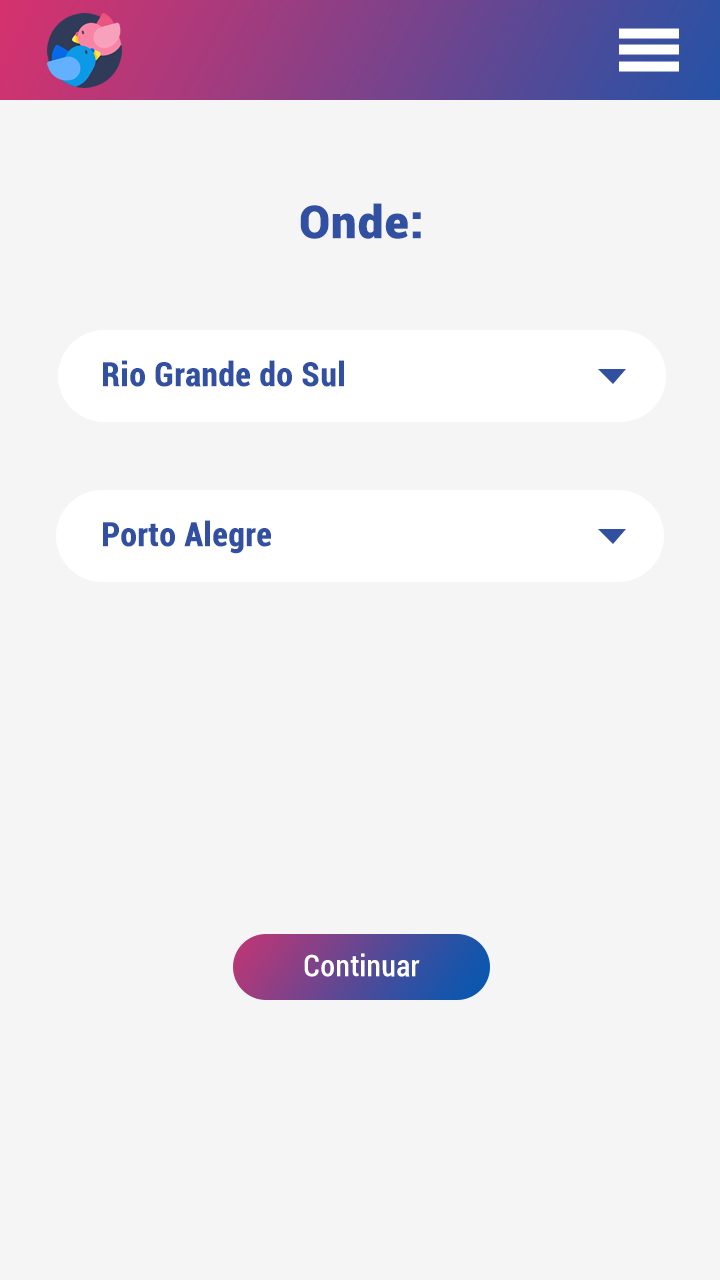
<style>
.page{position:relative;width:720px;height:1280px;background:#f5f5f5}
.page>*{position:absolute;margin:0}
.t1{font:45px "Roboto-Black";color:#3150a1;font-weight:bold}
.t2{font:33px "Roboto-BoldCondensed";color:#3150a1;font-weight:bold}
.t3{font:29px "Roboto-Condensed";color:#ffffff;font-weight:bold}
</style>
<div class="page">
<p class="t1" style="left:300px;top:203px;width:121px;height:36px">Onde:</p>
<p class="t2" style="left:103px;top:360px;width:241px;height:27px">Rio Grande do Sul</p>
<p class="t2" style="left:103px;top:520px;width:168px;height:34px">Porto Alegre</p>
<p class="t3" style="left:304px;top:953px;width:116px;height:24px">Continuar</p>
</div>
